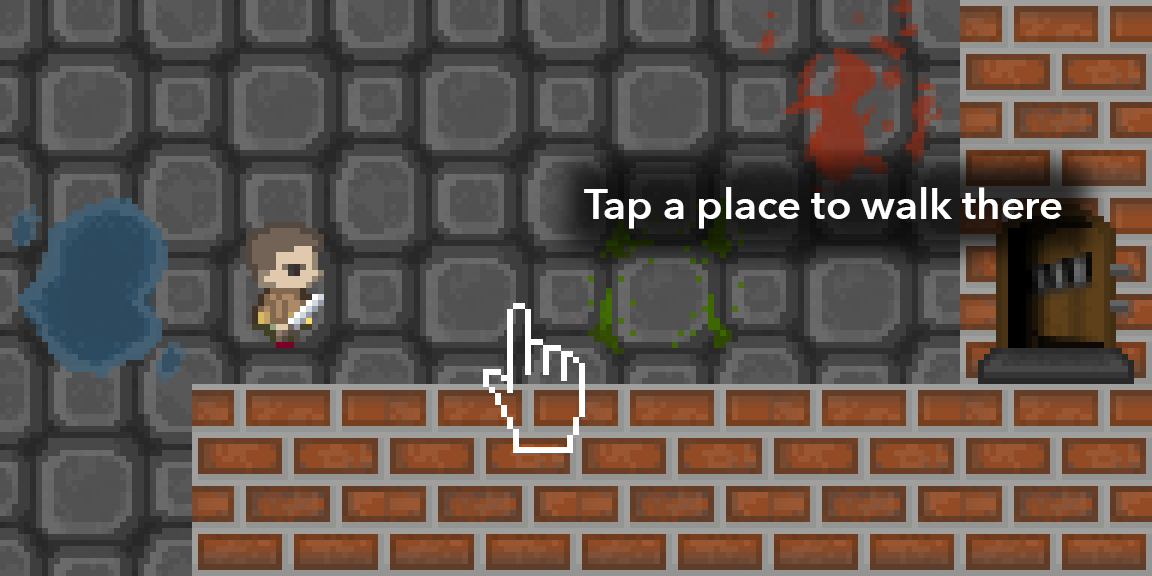
<style>
.page{position:relative;width:1152px;height:576px}
.page>*{position:absolute;margin:0}
.t1{font:41.7px "AvenirNext-DemiBold";color:#ffffff}
</style>
<div class="page">
<p class="t1" style="left:584px;top:187px;width:478px;height:42px">Tap a place to walk there</p>
</div>
